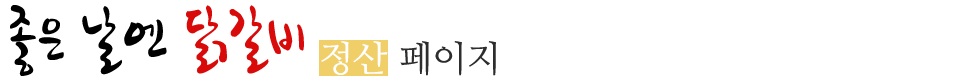
<style>
.page{position:relative;width:960px;height:80px;background:#ffffff}
.page>*{position:absolute;margin:0}
.t1{font:72px "DXSeNB-KSCpc-EUC-H";color:#000000}
.t2{font:72px "DXSeNB-KSCpc-EUC-H";color:#d90a0a}
.t3{font:36px "NanumMyeongjo-YetHangul";color:#2d2d2d}
.t4{font:36px "NanumMyeongjo-YetHangul";color:#ffffff}
</style>
<div class="page">
<p class="t1" style="left:10px;top:5px;width:294px;height:71px">좋은 날엔 <span class="t2">닭갈비</span></p>
<p class="t3" style="left:321px;top:41px;width:175px;height:35px"><span class="t4">정산</span> 페이지</p>
</div>
